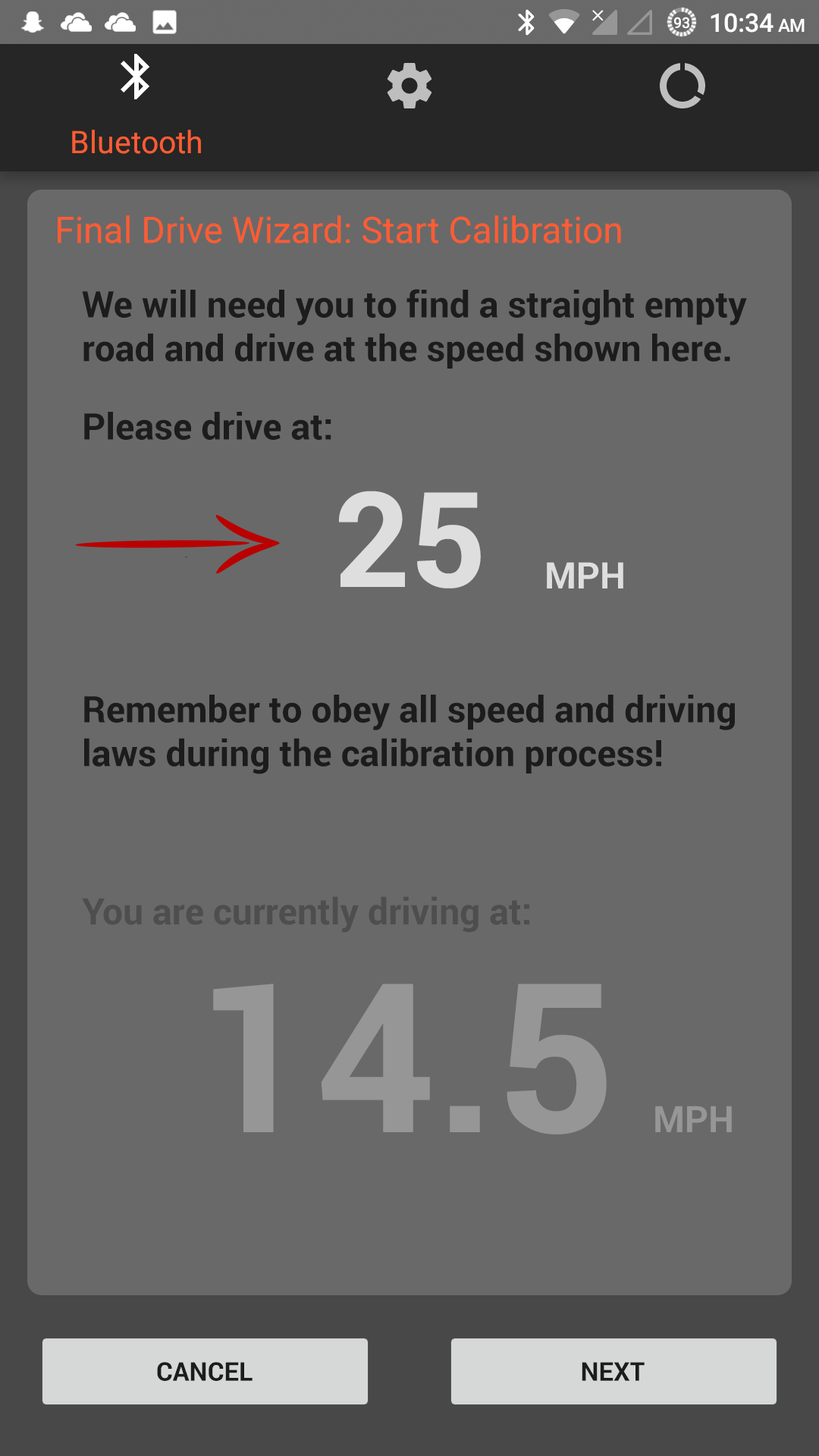
<style>
.page{position:relative;width:819px;height:1456px;background:#696969}
.page>*{position:absolute;margin:0}
.t1{font:36.4px "Roboto-Regular";color:#ff5c33}
.t2{font:36.4px "Roboto-Bold";color:#1c1c1c}
.t3{font:132.7px "Roboto-Bold";color:#dedede}
.t4{font:36.4px "Roboto-Bold";color:#dedede}
.t5{font:36.4px "Roboto-Bold";color:#4e4e4e}
.t6{font:208.5px "Roboto-Bold";color:#969696}
.t7{font:36.4px "Roboto-Bold";color:#969696}
.t8{font:25.8px "Roboto-Bold";color:#1c1c1c}
</style>
<div class="page">
<p class="t1" style="left:58px;top:215px;width:563px;height:28px">Final Drive Wizard: Start Calibration</p>
<p class="t2" style="left:82px;top:289px;width:665px;height:80px">We will need you to find a straight empty<br>road and drive at the speed shown here.</p>
<p class="t2" style="left:84px;top:412px;width:247px;height:28px">Please drive at:</p>
<p class="t3" style="left:339px;top:491px;width:142px;height:97px">25</p>
<p class="t4" style="left:547px;top:562px;width:76px;height:26px">MPH</p>
<p class="t2" style="left:84px;top:695px;width:651px;height:79px">Remember to obey all speed and driving<br>laws during the calibration process!</p>
<p class="t5" style="left:82px;top:896px;width:447px;height:37px">You are currently driving at:</p>
<p class="t6" style="left:213px;top:984px;width:394px;height:150px">14.5</p>
<p class="t7" style="left:655px;top:1106px;width:77px;height:26px">MPH</p>
<p class="t8" style="left:157px;top:1362px;width:96px;height:19px">CANCEL</p>
<p class="t8" style="left:582px;top:1362px;width:63px;height:19px">NEXT</p>
</div>
